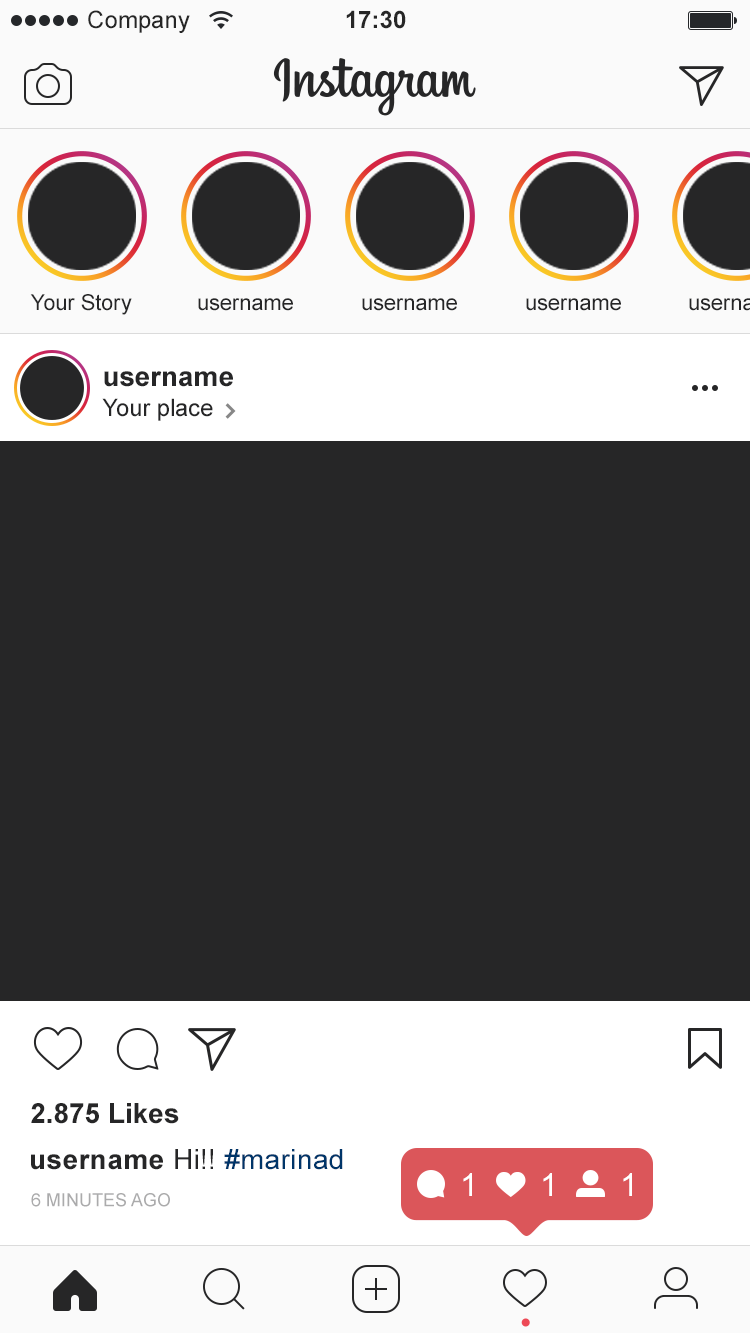
<style>
.page{position:relative;width:750px;height:1334px;background:#262627}
.page>*{position:absolute;margin:0}
.t1{font:24px "ArialMT";color:#262626}
.t2{font:24px "Arial-BoldMT";color:#262626}
.t3{font:22px "ArialMT";color:#262627}
.t4{font:28px "Arial-BoldMT";color:#262627}
.t5{font:24px "ArialMT";color:#262627}
.t6{font:28px "Arial-BoldMT";letter-spacing:0.015em;color:#262627}
.t7{font:28px "ArialMT";letter-spacing:0.015em;color:#262627}
.t8{font:28px "ArialMT";letter-spacing:0.015em;color:#003569}
.t9{font:32px "ArialMT";color:#ffffff}
.t10{font:18px "ArialMT";color:#ababac}
</style>
<div class="page">
<p class="t1" style="left:88px;top:10px;width:102px;height:23px">Company</p>
<p class="t2" style="left:346px;top:10px;width:60px;height:19px">17:30</p>
<p class="t3" style="left:30px;top:294px;width:102px;height:21px">Your Story</p>
<p class="t3" style="left:198px;top:298px;width:95px;height:13px">username</p>
<p class="t3" style="left:362px;top:298px;width:95px;height:13px">username</p>
<p class="t3" style="left:526px;top:298px;width:95px;height:13px">username</p>
<p class="t4" style="left:104px;top:371px;width:129px;height:16px">username</p>
<p class="t5" style="left:102px;top:398px;width:111px;height:23px">Your place</p>
<p class="t4" style="left:31px;top:1103px;width:148px;height:21px">2.875 Likes</p>
<p class="t6" style="left:31px;top:1149px;width:312px;height:21px">username<span class="t7"> Hi!! </span><span class="t8">#marinad</span></p>
<p class="t9" style="left:463px;top:1173px;width:9px;height:23px">1</p>
<p class="t9" style="left:543px;top:1173px;width:9px;height:23px">1</p>
<p class="t9" style="left:623px;top:1173px;width:9px;height:23px">1</p>
<p class="t10" style="left:31px;top:1193px;width:139px;height:14px">6 MINUTES AGO</p>
</div>
